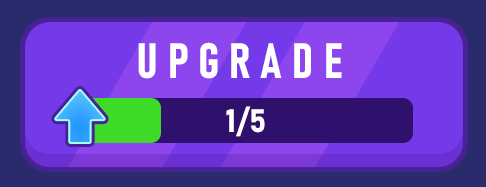
<style>
.page{position:relative;width:486px;height:187px;background:#7439e8}
.page>*{position:absolute;margin:0}
.t1{font:49.1px "Bahnschrift-BoldCondensed";color:#ffffff}
.t2{font:31.9px "Bahnschrift-Bold";color:#ffffff}
</style>
<div class="page">
<p class="t1" style="left:138px;top:42px;width:204px;height:37px">UPGRADE</p>
<p class="t2" style="left:226px;top:106px;width:39px;height:31px">1/5</p>
</div>
